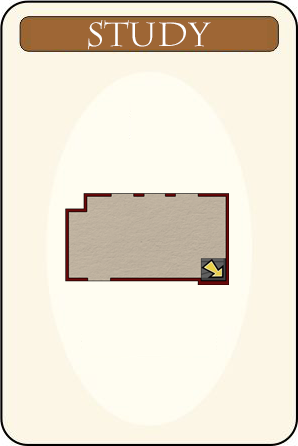
<style>
.page{position:relative;width:298px;height:446px;background:#fcf6e6}
.page>*{position:absolute;margin:0}
.t1{font:33.3px "CharlemagneStd-Regular";color:#ffffff}
</style>
<div class="page">
<p class="t1" style="left:88px;top:20px;width:123px;height:30px">Study</p>
</div>
